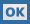
<style>
.page{position:relative;width:30px;height:24px;background:#336ca1}
.page>*{position:absolute;margin:0}
.t1{font:12px "Verdana-Bold";color:#336ca1}
</style>
<div class="page">
<p class="t1" style="left:5px;top:7px;width:20px;height:10px">OK</p>
</div>
